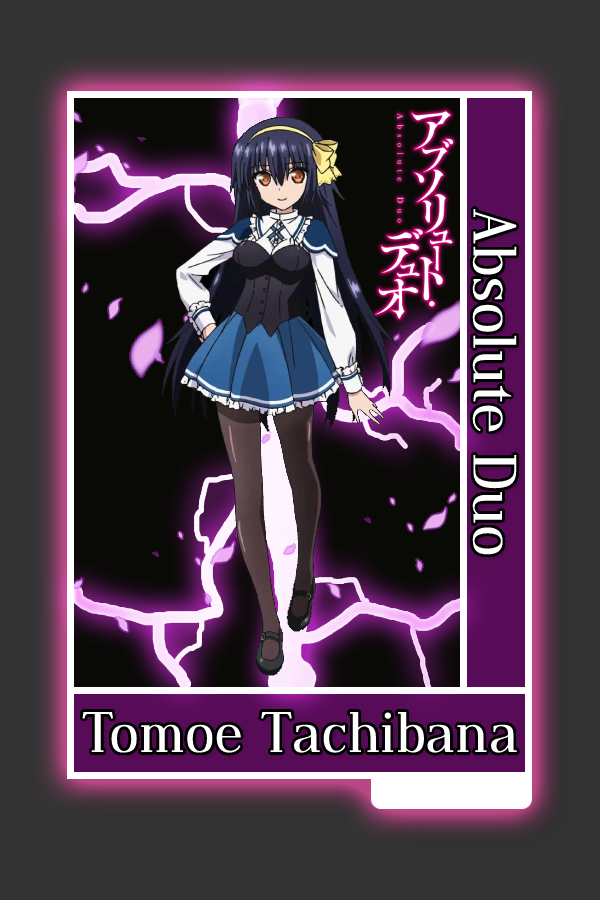
<style>
.page{position:relative;width:600px;height:900px;background:#333333}
.page>*{position:absolute;margin:0}
.t1{font:60px "DustismoRoman";color:#ffffff}
.t2{font:56px "DustismoRoman";color:#ffffff}
</style>
<div class="page">
<p class="t1" style="left:472px;top:208px;width:45px;height:347px;rotate:90deg">Absolute Duo</p>
<p class="t2" style="left:82px;top:712px;width:435px;height:41px">Tomoe Tachibana</p>
</div>
